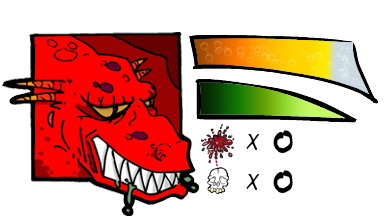
<style>
.page{position:relative;width:390px;height:220px;background:#ffffff}
.page>*{position:absolute;margin:0}
.t1{font:24px "KimsHand";color:#000000}
.t2{font:36px "Fiddlesticks";color:#000000}
</style>
<div class="page">
<p class="t1" style="left:246px;top:134px;width:13px;height:16px">X</p>
<p class="t2" style="left:273px;top:130px;width:20px;height:24px">0</p>
<p class="t1" style="left:246px;top:174px;width:13px;height:16px">X</p>
<p class="t2" style="left:273px;top:170px;width:20px;height:24px">0</p>
</div>
